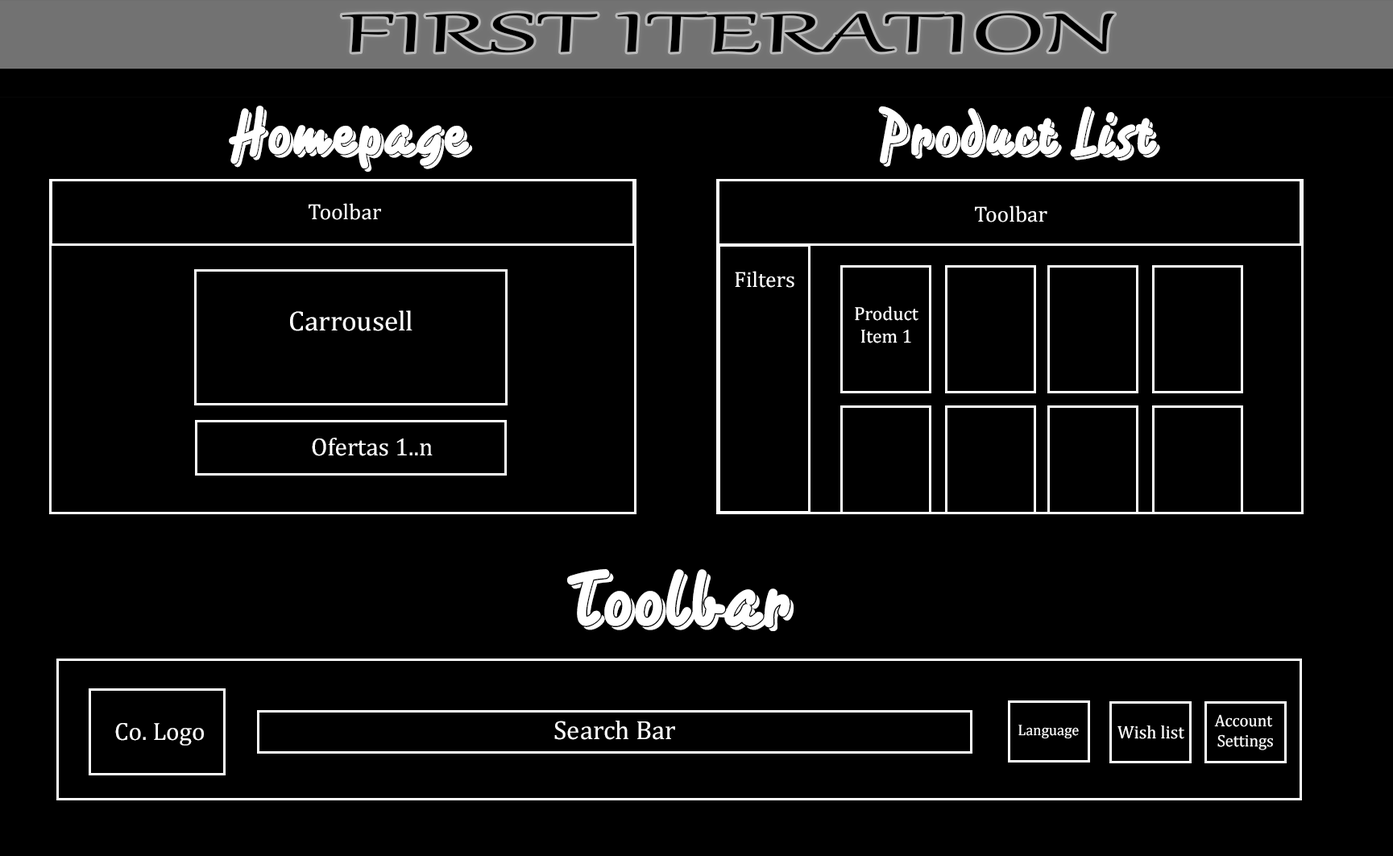
<style>
.page{position:relative;width:1393px;height:856px;background:#000000}
.page>*{position:absolute;margin:0}
.t1{font:66.5px "Gabriola";color:#000000;scale:2.08 1}
.t2{font:57.9px "Caminata-One";color:#ffffff}
.t3{font:22.2px "Cambria";color:#ffffff}
.t4{font:28.1px "Cambria";color:#ffffff}
.t5{font:19px "Cambria";color:#ffffff}
.t6{font:25.2px "Cambria";color:#ffffff}
.t7{font:71px "Caminata-One";color:#ffffff}
.t8{font:16.7px "Cambria";color:#ffffff}
.t9{font:26.6px "Cambria";color:#ffffff}
.t10{font:15.2px "Cambria";color:#ffffff}
.t11{font:18.1px "Cambria";color:#ffffff}
</style>
<div class="page">
<p class="t1" style="left:342px;top:13px;width:773px;height:40px">FIRST ITERATION</p>
<p class="t2" style="left:229px;top:106px;width:244px;height:66px">Homepage</p>
<p class="t2" style="left:878px;top:106px;width:282px;height:61px">Product List</p>
<p class="t3" style="left:309px;top:203px;width:72px;height:17px">Toolbar</p>
<p class="t3" style="left:975px;top:205px;width:73px;height:17px">Toolbar</p>
<p class="t3" style="left:735px;top:271px;width:60px;height:17px">Filters</p>
<p class="t4" style="left:290px;top:310px;width:123px;height:21px">Carrousell</p>
<p class="t5" style="left:855px;top:306px;width:64px;height:37px;text-align:center">Product<br>Item 1</p>
<p class="t6" style="left:312px;top:438px;width:121px;height:18px">Ofertas 1..n</p>
<p class="t7" style="left:567px;top:569px;width:228px;height:62px">Toolbar</p>
<p class="t8" style="left:1214px;top:714px;width:59px;height:36px;text-align:center">Account <br>Settings</p>
<p class="t6" style="left:115px;top:723px;width:89px;height:22px">Co. Logo</p>
<p class="t9" style="left:554px;top:720px;width:121px;height:20px">Search Bar</p>
<p class="t10" style="left:1019px;top:724px;width:60px;height:15px">Language</p>
<p class="t11" style="left:1118px;top:725px;width:67px;height:14px">Wish list</p>
</div>
